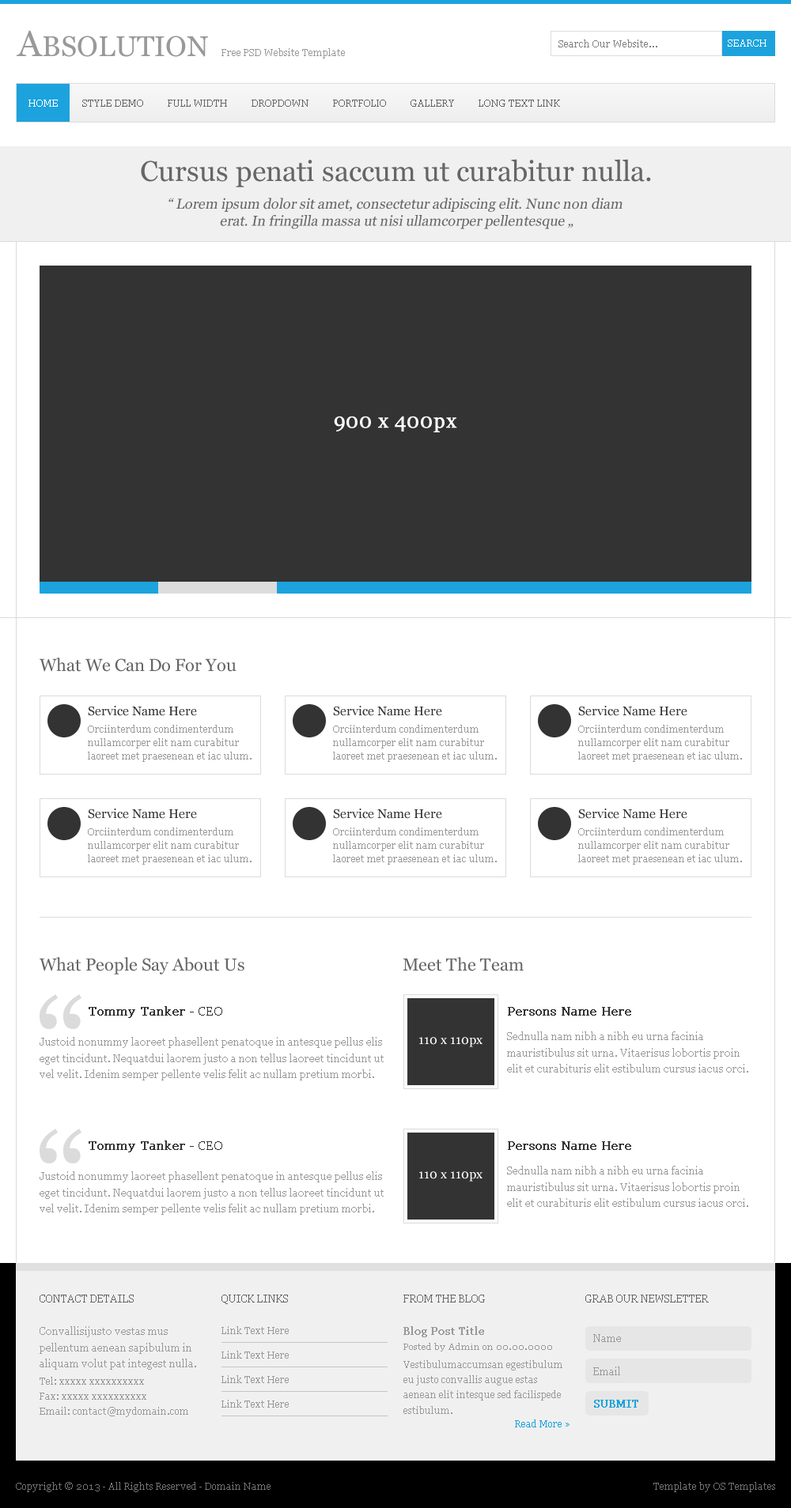
<style>
.page{position:relative;width:791px;height:1508px;background:#ffffff}
.page>*{position:absolute;margin:0}
.t1{font:28.5px "Georgia";color:#999999}
.t2{font:36.4px "Georgia";color:#999999}
.t3{font:9.5px "Georgia";color:#7f7f7f}
.t4{font:9.5px "Georgia";color:#ffffff}
.t5{font:9.5px "Georgia";color:#999999}
.t6{font:9.5px "Georgia";color:#666666}
.t7{font:28.5px "Georgia";color:#666666}
.t8{font:14.2px/17.1px "Georgia";color:#666666;font-style:italic}
.t9{font:20.6px "Georgia";color:#ffffff;font-weight:bold}
.t10{font:17.4px "Georgia";color:#666666}
.t11{font:12.6px "Georgia";color:#333333}
.t12{font:9.5px/13.3px "Georgia";color:#999999}
.t13{font:12.6px "Georgia";color:#333333;font-weight:bold}
.t14{font:10.3px/16.4px "Georgia";color:#999999}
.t15{font:12.6px "Georgia";color:#ffffff}
.t16{font:10.3px "Georgia";color:#666666}
.t17{font:10.3px "Georgia";color:#999999;font-weight:bold}
.t18{font:10.3px "Georgia";color:#999999}
.t19{font:8.7px "Georgia";color:#999999}
.t20{font:9.5px/15.2px "Georgia";color:#999999}
.t21{font:10.3px "Georgia";color:#1ca3dd;font-weight:bold}
.t22{font:9.5px "Georgia";color:#1ca3dd}
.t23{font:9.5px "Georgia";color:#737373}
</style>
<div class="page">
<p class="t1" style="left:17px;top:30px;width:191px;height:27px"><span class="t2">A</span>BSOLUTION</p>
<p class="t3" style="left:558px;top:40px;width:99px;height:7px">Search Our Website...</p>
<p class="t4" style="left:727px;top:40px;width:39px;height:7px">SEARCH</p>
<p class="t5" style="left:221px;top:48px;width:124px;height:11px">Free PSD Website Template</p>
<p class="t4" style="left:28px;top:100px;width:30px;height:7px">HOME</p>
<p class="t6" style="left:82px;top:100px;width:61px;height:7px">STYLE DEMO</p>
<p class="t6" style="left:168px;top:100px;width:59px;height:7px">FULL WIDTH</p>
<p class="t6" style="left:251px;top:100px;width:57px;height:7px">DROPDOWN</p>
<p class="t6" style="left:333px;top:100px;width:53px;height:7px">PORTFOLIO</p>
<p class="t6" style="left:410px;top:100px;width:44px;height:7px">GALLERY</p>
<p class="t6" style="left:478px;top:100px;width:82px;height:7px">LONG TEXT LINK</p>
<p class="t7" style="left:141px;top:159px;width:510px;height:28px">Cursus penati saccum ut curabitur nulla.</p>
<p class="t8" style="left:168px;top:198px;width:454px;height:31px;text-align:center">“ Lorem ipsum dolor sit amet, consectetur adipiscing elit. Nunc non diam <br>erat. In fringilla massa ut nisi ullamcorper pellentesque „</p>
<p class="t9" style="left:334px;top:416px;width:123px;height:16px">900 x 400px</p>
<p class="t10" style="left:40px;top:658px;width:196px;height:14px">What We Can Do For You</p>
<p class="t11" style="left:88px;top:706px;width:109px;height:10px">Service Name Here</p>
<p class="t11" style="left:333px;top:706px;width:109px;height:10px">Service Name Here</p>
<p class="t11" style="left:578px;top:706px;width:109px;height:10px">Service Name Here</p>
<p class="t12" style="left:88px;top:725px;width:163px;height:37px">Orciinterdum condimenterdum nullamcorper elit nam curabitur laoreet met praesenean et iac ulum.</p>
<p class="t12" style="left:333px;top:725px;width:163px;height:37px">Orciinterdum condimenterdum nullamcorper elit nam curabitur laoreet met praesenean et iac ulum.</p>
<p class="t12" style="left:578px;top:725px;width:164px;height:37px">Orciinterdum condimenterdum nullamcorper elit nam curabitur laoreet met praesenean et iac ulum.</p>
<p class="t11" style="left:88px;top:809px;width:109px;height:10px">Service Name Here</p>
<p class="t11" style="left:333px;top:809px;width:109px;height:10px">Service Name Here</p>
<p class="t11" style="left:578px;top:809px;width:109px;height:10px">Service Name Here</p>
<p class="t12" style="left:88px;top:828px;width:163px;height:37px">Orciinterdum condimenterdum nullamcorper elit nam curabitur laoreet met praesenean et iac ulum.</p>
<p class="t12" style="left:333px;top:828px;width:163px;height:37px">Orciinterdum condimenterdum nullamcorper elit nam curabitur laoreet met praesenean et iac ulum.</p>
<p class="t12" style="left:578px;top:828px;width:164px;height:37px">Orciinterdum condimenterdum nullamcorper elit nam curabitur laoreet met praesenean et iac ulum.</p>
<p class="t10" style="left:40px;top:957px;width:204px;height:18px">What People Say About Us</p>
<p class="t10" style="left:402px;top:957px;width:121px;height:15px">Meet The Team</p>
<p class="t13" style="left:89px;top:1006px;width:133px;height:12px">Tommy Tanker<span class="t11"> - CEO</span></p>
<p class="t13" style="left:508px;top:1007px;width:123px;height:9px">Persons Name Here</p>
<p class="t14" style="left:40px;top:1037px;width:343px;height:44px">Justoid nonummy laoreet phasellent penatoque in antesque pellus elis eget tincidunt. Nequatdui laorem justo a non tellus laoreet tincidunt ut vel velit. Idenim semper pellente velis felit ac nullam pretium morbi.</p>
<p class="t15" style="left:419px;top:1037px;width:63px;height:10px">110 x 110px</p>
<p class="t14" style="left:507px;top:1032px;width:241px;height:41px">Sednulla nam nibh a nibh eu urna facinia mauristibulus sit urna. Vitaerisus lobortis proin elit et curabituris elit estibulum cursus iacus orci.</p>
<p class="t13" style="left:89px;top:1141px;width:133px;height:12px">Tommy Tanker<span class="t11"> - CEO</span></p>
<p class="t13" style="left:508px;top:1142px;width:123px;height:8px">Persons Name Here</p>
<p class="t14" style="left:507px;top:1166px;width:241px;height:41px">Sednulla nam nibh a nibh eu urna facinia mauristibulus sit urna. Vitaerisus lobortis proin elit et curabituris elit estibulum cursus iacus orci.</p>
<p class="t14" style="left:40px;top:1172px;width:343px;height:43px">Justoid nonummy laoreet phasellent penatoque in antesque pellus elis eget tincidunt. Nequatdui laorem justo a non tellus laoreet tincidunt ut vel velit. Idenim semper pellente velis felit ac nullam pretium morbi.</p>
<p class="t15" style="left:419px;top:1172px;width:63px;height:10px">110 x 110px</p>
<p class="t16" style="left:40px;top:1295px;width:94px;height:8px">CONTACT DETAILS</p>
<p class="t16" style="left:221px;top:1295px;width:67px;height:9px">QUICK LINKS</p>
<p class="t16" style="left:403px;top:1295px;width:82px;height:8px">FROM THE BLOG</p>
<p class="t16" style="left:585px;top:1295px;width:123px;height:8px">GRAB OUR NEWSLETTER</p>
<p class="t14" style="left:40px;top:1327px;width:156px;height:43px">Convallisijusto vestas mus pellentum aenean sapibulum in aliquam volut pat integest nulla.</p>
<p class="t5" style="left:221px;top:1327px;width:68px;height:7px">Link Text Here</p>
<p class="t17" style="left:403px;top:1327px;width:81px;height:11px">Blog Post Title</p>
<p class="t18" style="left:593px;top:1334px;width:28px;height:8px">Name</p>
<p class="t19" style="left:403px;top:1343px;width:149px;height:9px">Posted by Admin on 00.00.0000</p>
<p class="t5" style="left:221px;top:1351px;width:68px;height:8px">Link Text Here</p>
<p class="t20" style="left:403px;top:1361px;width:159px;height:53px">Vestibulumaccumsan egestibulum eu justo convallis augue estas aenean elit intesque sed facilispede estibulum.</p>
<p class="t18" style="left:593px;top:1367px;width:27px;height:9px">Email</p>
<p class="t20" style="left:40px;top:1377px;width:148px;height:40px">Tel: xxxxx xxxxxxxxxx<br>Fax: xxxxx xxxxxxxxxx<br>Email: contact@mydomain.com</p>
<p class="t5" style="left:221px;top:1376px;width:68px;height:7px">Link Text Here</p>
<p class="t5" style="left:221px;top:1400px;width:68px;height:8px">Link Text Here</p>
<p class="t21" style="left:594px;top:1400px;width:44px;height:8px">SUBMIT</p>
<p class="t22" style="left:515px;top:1420px;width:54px;height:8px">Read More »</p>
<p class="t23" style="left:16px;top:1482px;width:254px;height:11px">Copyright © 2013 - All Rights Reserved - Domain Name</p>
<p class="t23" style="left:653px;top:1482px;width:122px;height:11px">Template by OS Templates</p>
</div>
